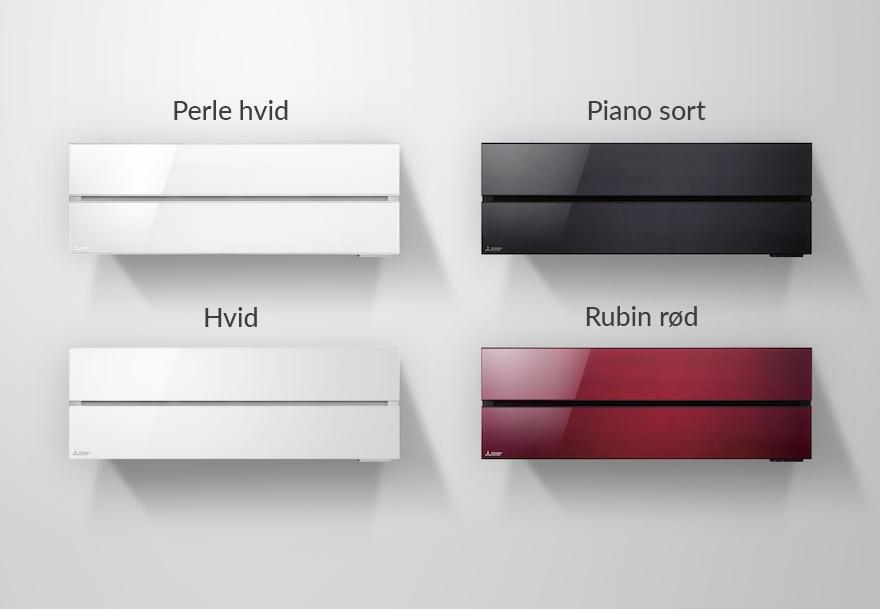
<style>
.page{position:relative;width:880px;height:609px}
.page>*{position:absolute;margin:0}
.t1{font:26.8px "Lato-Medium";color:#3e3e3e}
</style>
<div class="page">
<p class="t1" style="left:174px;top:100px;width:114px;height:20px">Perle hvid</p>
<p class="t1" style="left:588px;top:100px;width:118px;height:20px">Piano sort</p>
<p class="t1" style="left:205px;top:307px;width:52px;height:20px">Hvid</p>
<p class="t1" style="left:586px;top:306px;width:111px;height:21px">Rubin rød</p>
</div>
